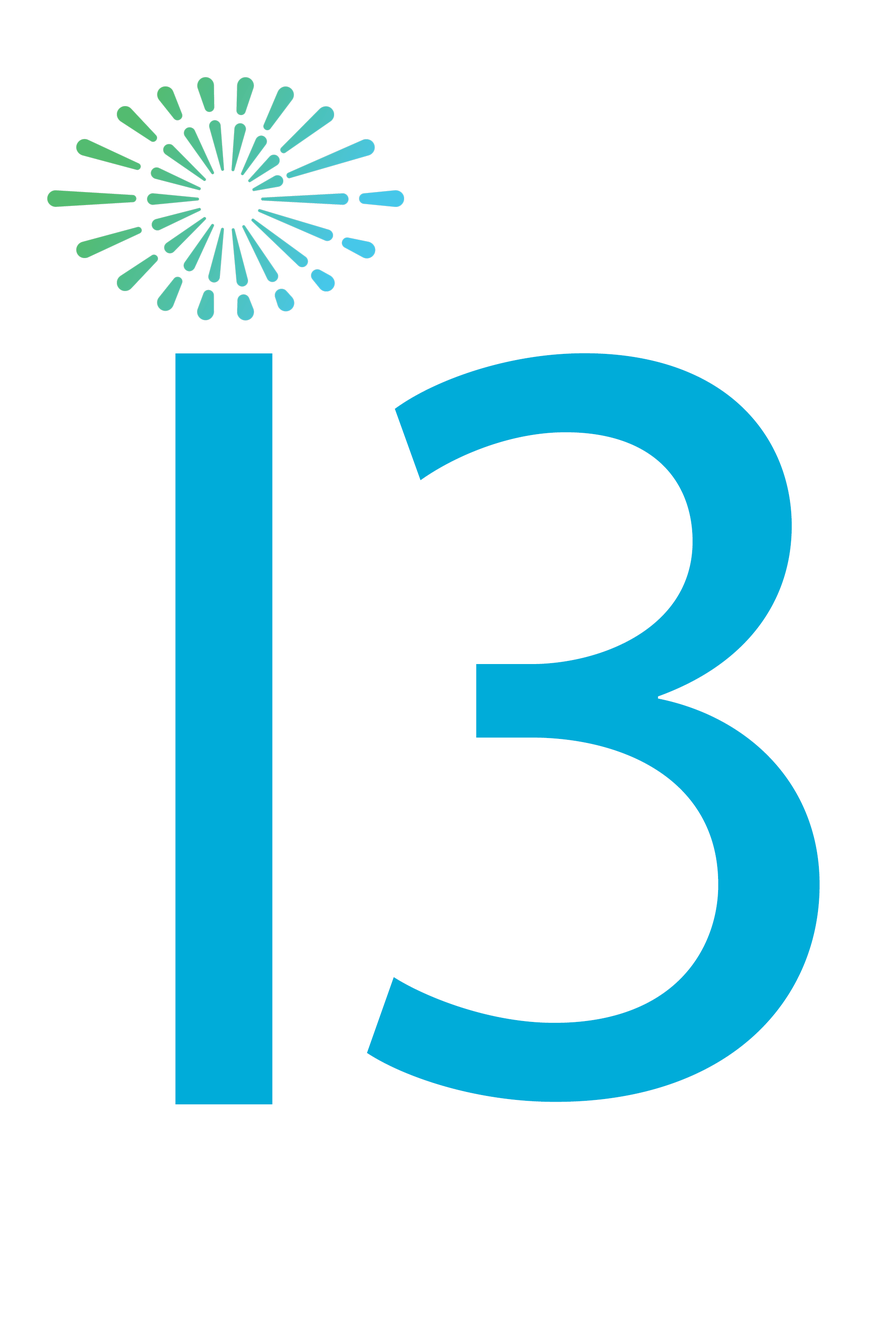
<style>
.page{position:relative;width:892px;height:1337px;background:#ffffff}
.page>*{position:absolute;margin:0}
.t1{font:1114.5px "MyriadPro-Regular";color:#00acd9}
</style>
<div class="page">
<p class="t1" style="left:175px;top:354px;width:97px;height:751px">I</p>
<p class="t1" style="left:366px;top:353px;width:453px;height:749px">3</p>
</div>
